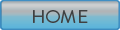
<style>
.page{position:relative;width:120px;height:30px}
.page>*{position:absolute;margin:0}
.t1{font:18.8px "BrandonGrotesque-Regular";color:#404041}
</style>
<div class="page">
<p class="t1" style="left:33px;top:10px;width:55px;height:13px">HOME</p>
</div>
